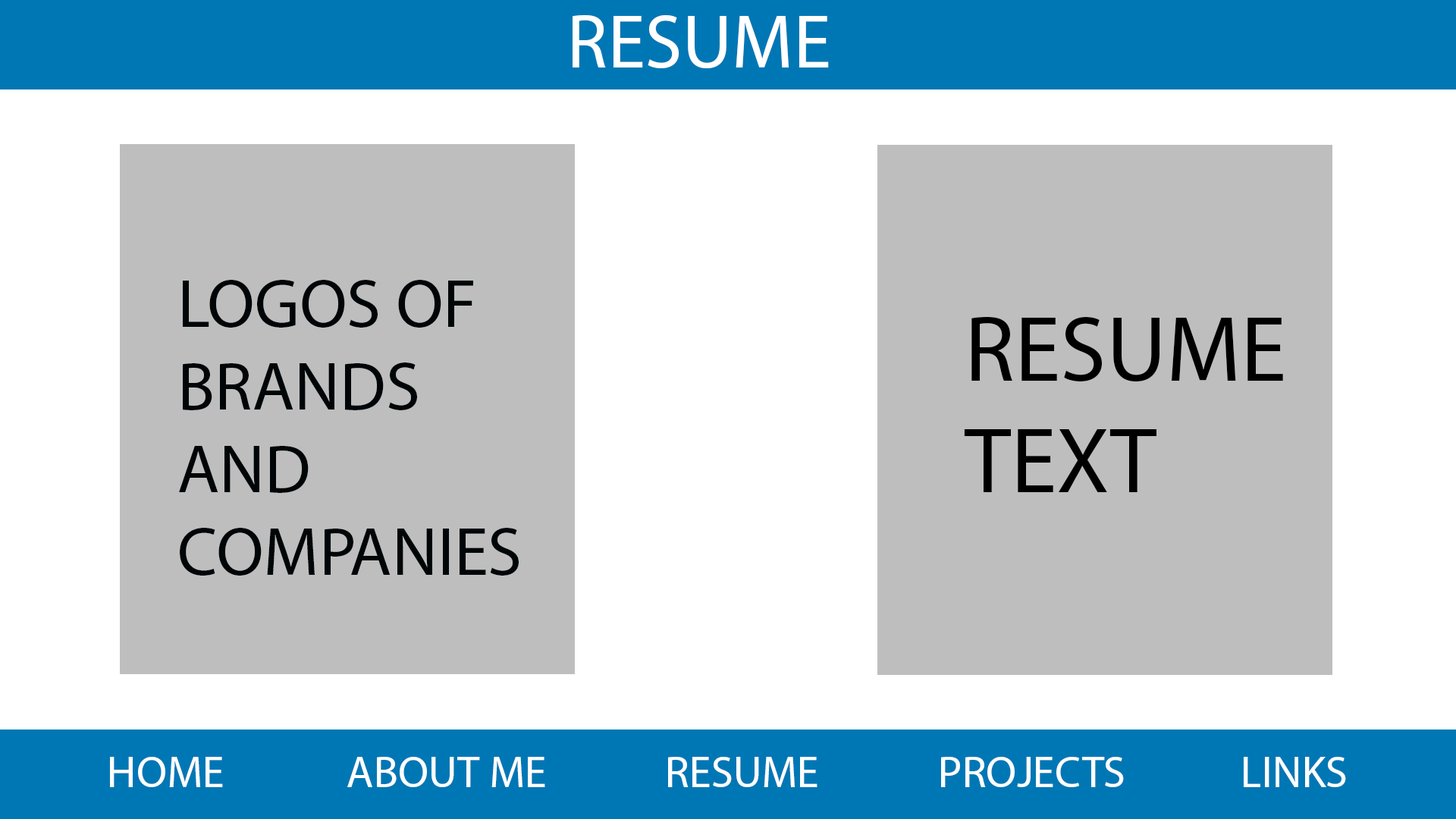
<style>
.page{position:relative;width:1456px;height:819px;background:#ffffff}
.page>*{position:absolute;margin:0}
.t1{font:76.2px "MyriadPro-Regular";color:#ffffff}
.t2{font:69px "MyriadPro-Regular";color:#000508}
.t3{font:92.8px "MyriadPro-Regular";color:#000000}
.t4{font:44.4px "MyriadPro-Regular";color:#ffffff}
</style>
<div class="page">
<p class="t1" style="left:573px;top:15px;width:256px;height:54px">RESUME</p>
<p class="t2" style="left:179px;top:280px;width:340px;height:296px">LOGOS OF<br>BRANDS<br>AND <br>COMPANIES</p>
<p class="t3" style="left:964px;top:316px;width:319px;height:176px">RESUME<br>TEXT</p>
<p class="t4" style="left:110px;top:757px;width:113px;height:30px">HOME</p>
<p class="t4" style="left:347px;top:757px;width:198px;height:30px">ABOUT ME</p>
<p class="t4" style="left:668px;top:757px;width:149px;height:30px">RESUME</p>
<p class="t4" style="left:941px;top:757px;width:183px;height:30px">PROJECTS</p>
<p class="t4" style="left:1244px;top:757px;width:102px;height:30px">LINKS</p>
</div>
